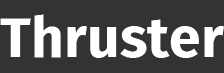
<style>
.page{position:relative;width:224px;height:73px;background:#333333}
.page>*{position:absolute;margin:0}
.t1{font:57px "FiraSans-Bold";color:#ffffff}
</style>
<div class="page">
<p class="t1" style="left:0px;top:14px;width:224px;height:44px">Thruster</p>
</div>
